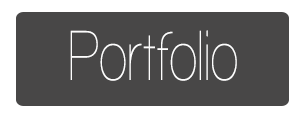
<style>
.page{position:relative;width:300px;height:113px;background:#484747}
.page>*{position:absolute;margin:0}
.t1{font:72px "WalkwayCondensed";color:#fefefe}
</style>
<div class="page">
<p class="t1" style="left:70px;top:30px;width:167px;height:51px">Portfolio</p>
</div>
